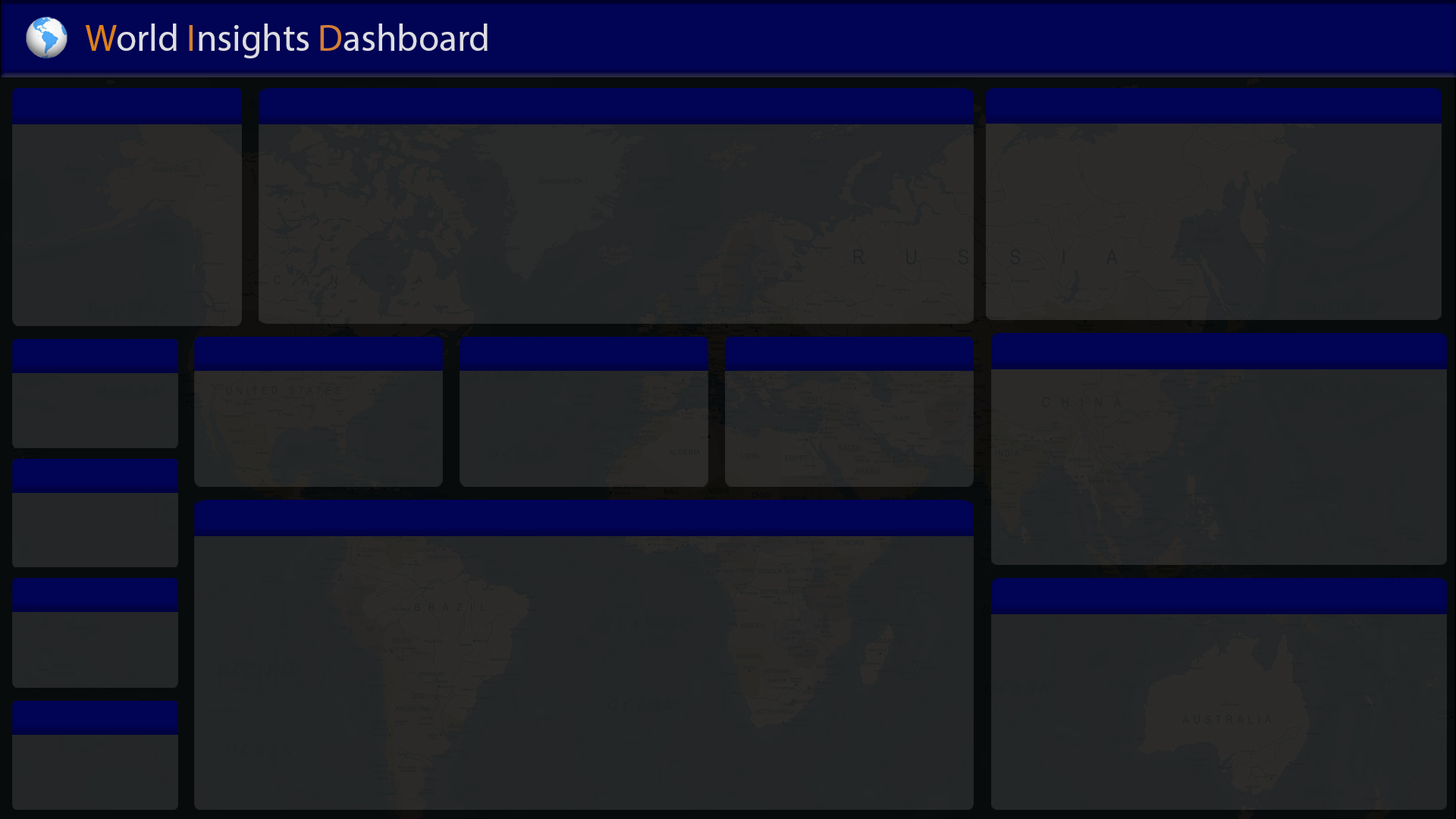
<style>
.page{position:relative;width:1456px;height:819px}
.page>*{position:absolute;margin:0}
.t1{font:37.6px "MyriadPro-Regular";color:#ffffff}
.t2{font:37.6px "MyriadPro-Regular";color:#ff9600}
.t3{font:37.6px "MyriadPro-Regular";color:#f49323}
.t4{font:37.6px "MyriadPro-Regular";color:#f5952a}
</style>
<div class="page">
<p class="t1" style="left:86px;top:24px;width:402px;height:34px;opacity:0.8"><span class="t2">W</span>orld <span class="t3">I</span>nsights <span class="t4">D</span>ashboard</p>
</div>
